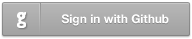
<style>
.page{position:relative;width:192px;height:39px}
.page>*{position:absolute;margin:0}
.t1{font:12px "HelveticaNeue-Bold";color:#ffffff}
</style>
<div class="page">
<p class="t1" style="left:61px;top:14px;width:108px;height:12px">Sign in with Github</p>
</div>
